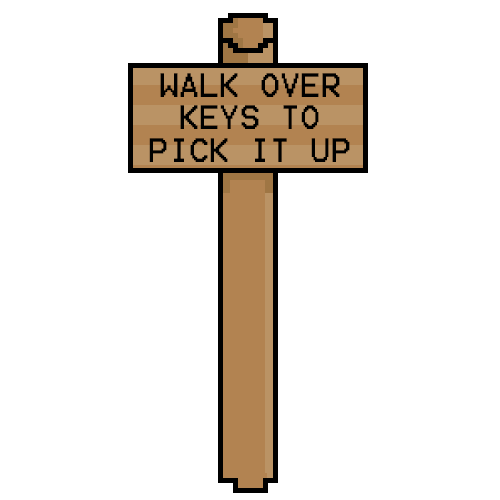
<style>
.page{position:relative;width:500px;height:500px;background:#ffffff}
.page>*{position:absolute;margin:0}
.t1{font:27px "Terminal";color:#000000}
</style>
<div class="page">
<p class="t1" style="left:149px;top:73px;width:201px;height:89px;text-align:center">WALK OVER<br>KEYS TO<br>PICK IT UP</p>
</div>
